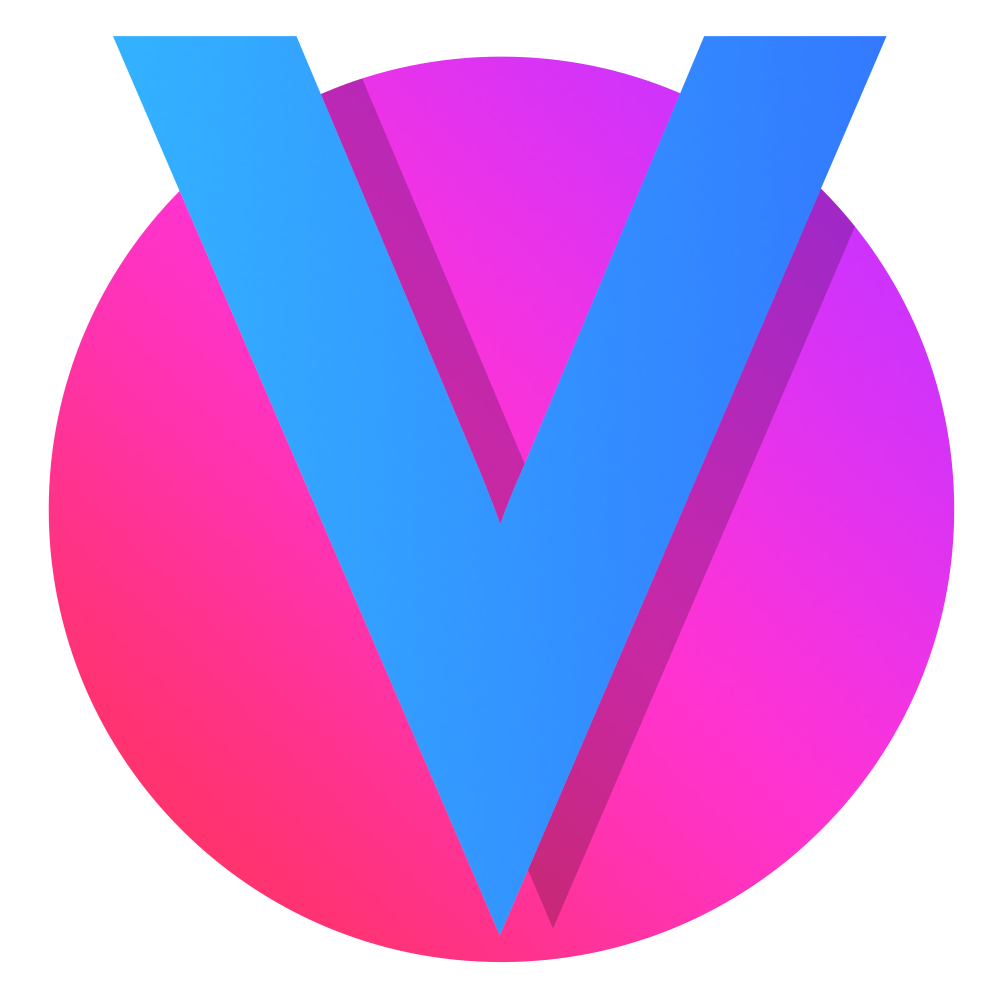
<style>
.page{position:relative;width:1000px;height:1000px;background:#ffffff}
.page>*{position:absolute;margin:0}
.t1{font:1137.5px "MotorOil1937M54";letter-spacing:-0.05em;color:#3395ff}
.t2{font:1083.3px "MotorOil1937M54";letter-spacing:-0.05em;color:#3395ff}
</style>
<div class="page">
<p class="t1" style="left:113px;top:36px;width:774px;height:900px">V</p>
<p class="t2" style="left:130px;top:62px;width:738px;height:858px">V</p>
</div>
